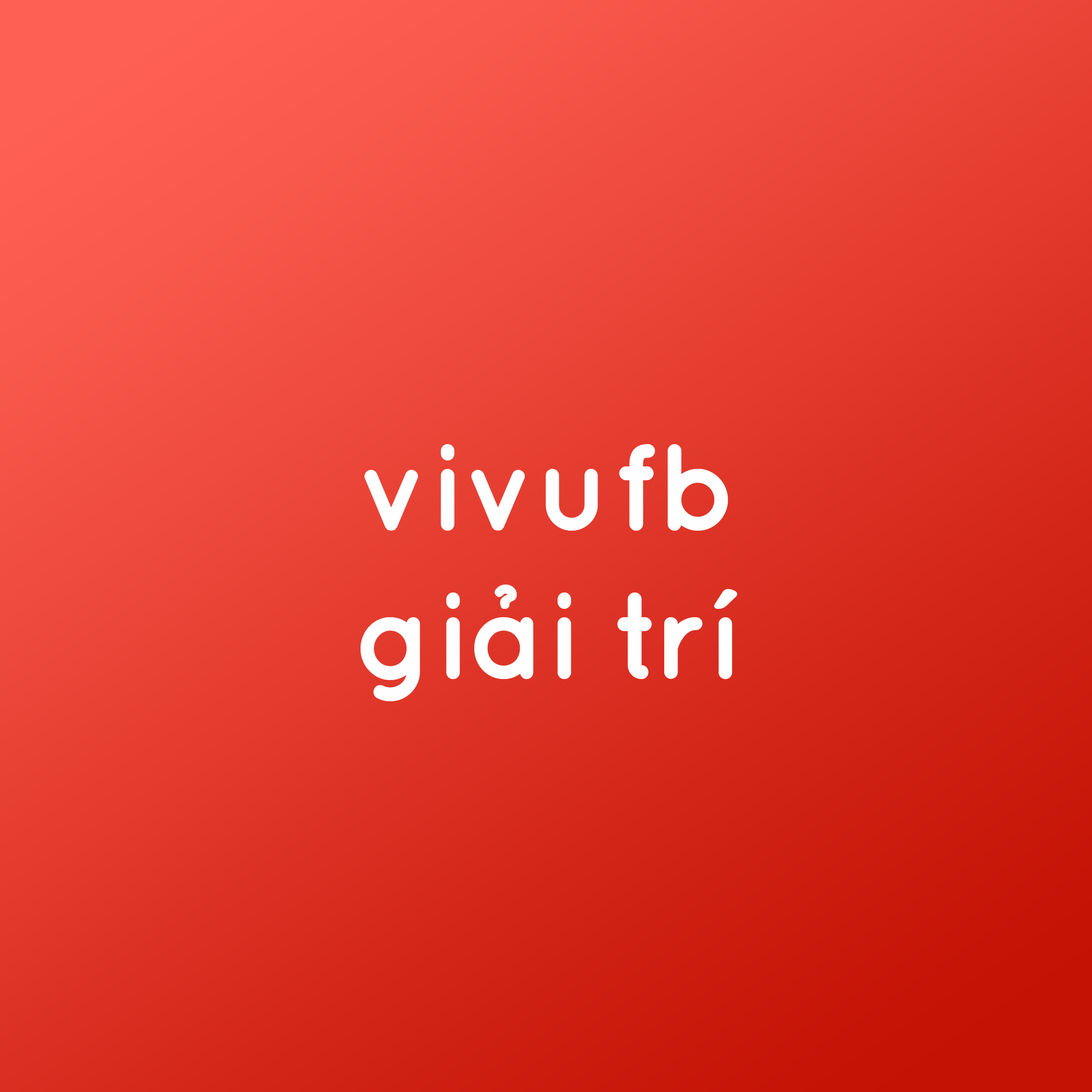
<style>
.page{position:relative;width:1092px;height:1092px}
.page>*{position:absolute;margin:0}
.t1{font:123.6px "VNFQuicksand-Bold";color:#fefefe}
</style>
<div class="page">
<p class="t1" style="left:361px;top:444px;width:376px;height:257px;text-align:center">vivufb<br>giải trí</p>
</div>
